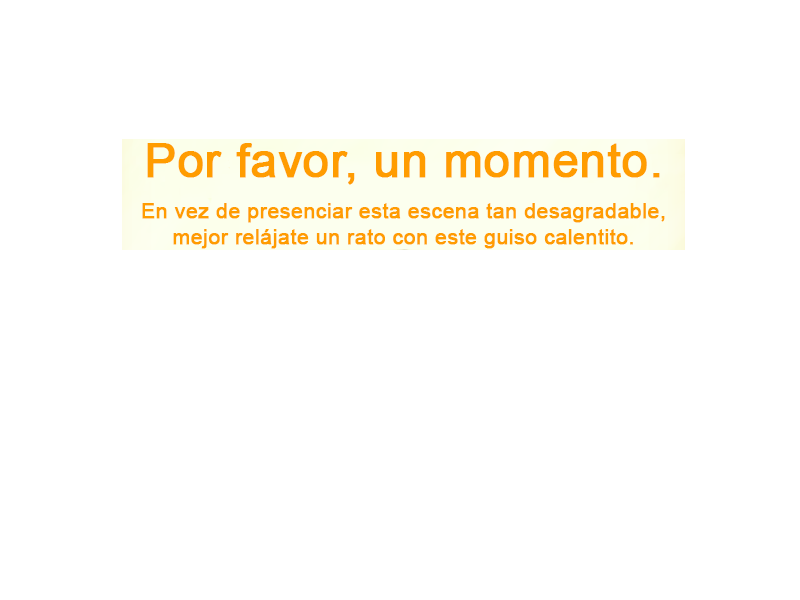
<style>
.page{position:relative;width:800px;height:600px;background:#ffffff}
.page>*{position:absolute;margin:0}
.t1{font:21.3px "ArialMT";color:#ff9c00;font-weight:bold}
.t2{font:47.3px "ArialMT";color:#ff9c00;font-weight:bold}
</style>
<div class="page">
<p class="t1" style="left:142px;top:143px;width:523px;height:106px;text-align:center"><span class="t2">Por favor, un momento.<br><br></span>En vez de presenciar esta escena tan desagradable,<br>mejor relájate un rato con este guiso calentito.</p>
</div>
